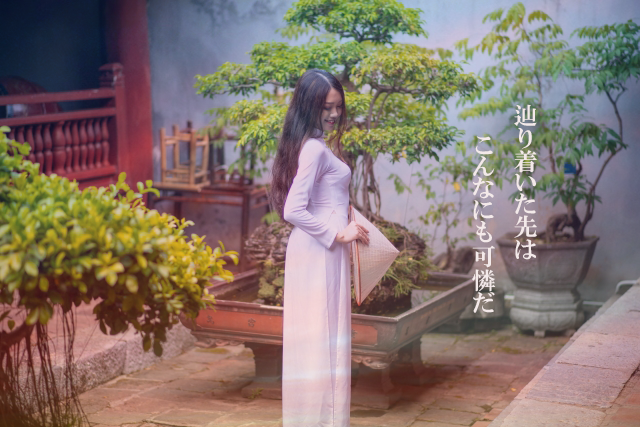
<style>
.page{position:relative;width:640px;height:427px}
.page>*{position:absolute;margin:0}
.t1{font:24px "HGPMinchoE";color:#f3e9e9}
</style>
<div class="page">
<p class="t1" style="left:472px;top:104px;width:65px;height:209px">辿り着いた先は<br>　　こんなにも可憐だ</p>
</div>
